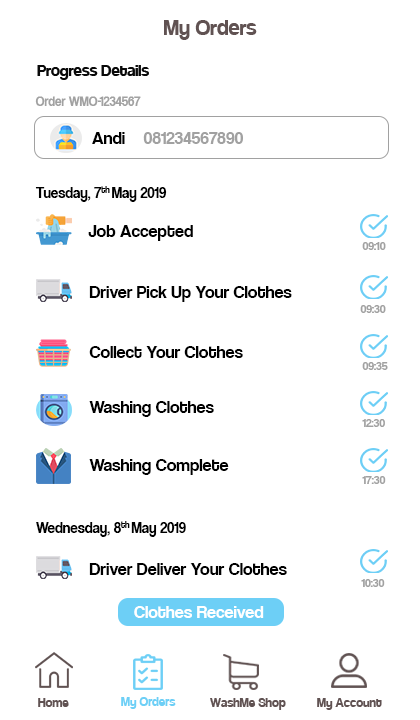
<style>
.page{position:relative;width:420px;height:720px;background:#ffffff}
.page>*{position:absolute;margin:0}
.t1{font:24px "Coolvetica-Regular";color:#605252}
.t2{font:18px "Coolvetica-Regular";color:#090909}
.t3{font:13.5px "CoolveticaRg-Regular";color:#a1a1a1;scale:0.96 1}
.t4{font:18px "CoolveticaRg-Regular";color:#000000}
.t5{font:18px "CoolveticaRg-Regular";color:#a1a1a1}
.t6{font:15px "CoolveticaRg-Regular";color:#000000}
.t7{font:12px "CoolveticaRg-Regular";color:#a1a1a1}
.t8{font:18px "CoolveticaRg-Regular";color:#ffffff}
.t9{font:14px "Coolvetica-Regular";color:#605252}
.t10{font:14px "Coolvetica-Regular";color:#6dcff6}
</style>
<div class="page">
<p class="t1" style="left:164px;top:20px;width:93px;height:20px">My Orders</p>
<p class="t2" style="left:37px;top:65px;width:112px;height:15px">Progress Details</p>
<p class="t3" style="left:35px;top:96px;width:106px;height:10px">Order WMO-1234567</p>
<p class="t4" style="left:92px;top:132px;width:33px;height:12px">Andi</p>
<p class="t5" style="left:143px;top:132px;width:100px;height:12px">081234567890</p>
<p class="t6" style="left:35px;top:186px;width:132px;height:16px">Tuesday, 7th May 2019</p>
<p class="t4" style="left:88px;top:225px;width:105px;height:16px">Job Accepted</p>
<p class="t7" style="left:362px;top:242px;width:24px;height:8px">09:10</p>
<p class="t4" style="left:89px;top:286px;width:203px;height:16px">Driver Pick Up Your Clothes</p>
<p class="t7" style="left:360px;top:305px;width:26px;height:8px">09:30</p>
<p class="t4" style="left:89px;top:346px;width:154px;height:12px">Collect Your Clothes</p>
<p class="t7" style="left:362px;top:362px;width:26px;height:8px">09:35</p>
<p class="t4" style="left:89px;top:401px;width:125px;height:16px">Washing Clothes</p>
<p class="t7" style="left:362px;top:419px;width:23px;height:8px">12:30</p>
<p class="t4" style="left:89px;top:459px;width:140px;height:16px">Washing Complete</p>
<p class="t7" style="left:362px;top:476px;width:24px;height:8px">17:30</p>
<p class="t6" style="left:36px;top:521px;width:150px;height:16px">Wednesday, 8th May 2019</p>
<p class="t4" style="left:89px;top:563px;width:198px;height:12px">Driver Deliver Your Clothes</p>
<p class="t7" style="left:361px;top:579px;width:24px;height:8px">10:30</p>
<p class="t8" style="left:134px;top:606px;width:130px;height:12px">Clothes Received</p>
<p class="t9" style="left:38px;top:698px;width:31px;height:9px">Home</p>
<p class="t10" style="left:121px;top:697px;width:55px;height:12px">My Orders</p>
<p class="t9" style="left:210px;top:698px;width:76px;height:12px">WashMe Shop</p>
<p class="t9" style="left:317px;top:698px;width:65px;height:12px">My Account</p>
</div>
